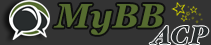
<style>
.page{position:relative;width:211px;height:45px;background:#333333}
.page>*{position:absolute;margin:0}
.t1{font:33.8px "Georgia-BoldItalic";color:#556b2f}
</style>
<div class="page">
<p class="t1" style="left:53px;top:4px;width:111px;height:31px">MyBB</p>
</div>
